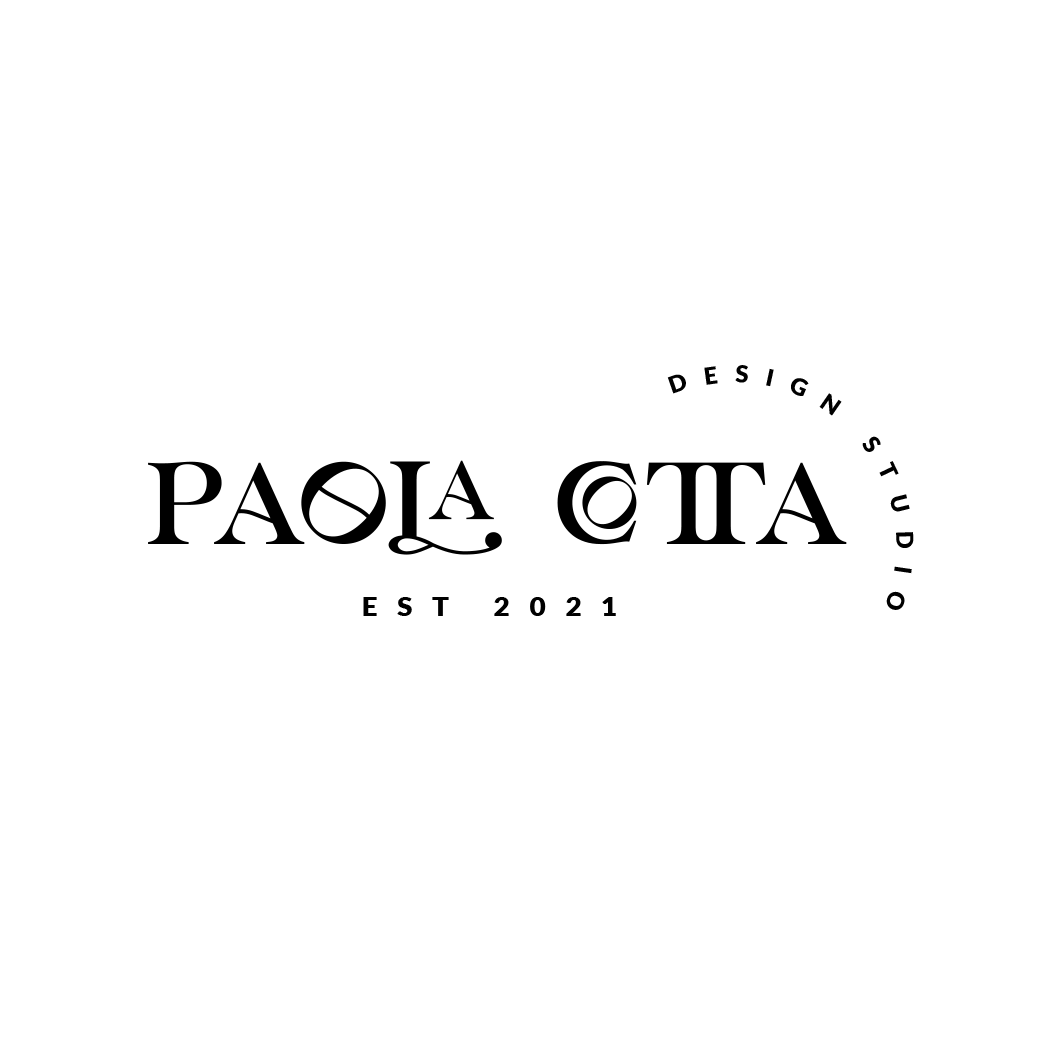
<style>
.page{position:relative;width:1042px;height:1042px;background:#ffffff}
.page>*{position:absolute;margin:0}
.t1{font:23.1px "Lato-Black";letter-spacing:0.7em;color:#000000;text-transform:uppercase}
.t2{font:116.4px "LorettoRegular";color:#000000;text-transform:uppercase}
.t3{font:27.3px "Lato-Black";letter-spacing:0.7em;color:#000000;text-transform:uppercase}
</style>
<div class="page">
<p class="t1" style="left:667px;top:365px;width:247px;height:245px;text-align:center">DESIGN STUDIO</p>
<p class="t2" style="left:148px;top:460px;width:699px;height:95px">Paola Cotta</p>
<p class="t3" style="left:363px;top:597px;width:253px;height:19px">EST 2021</p>
</div>
